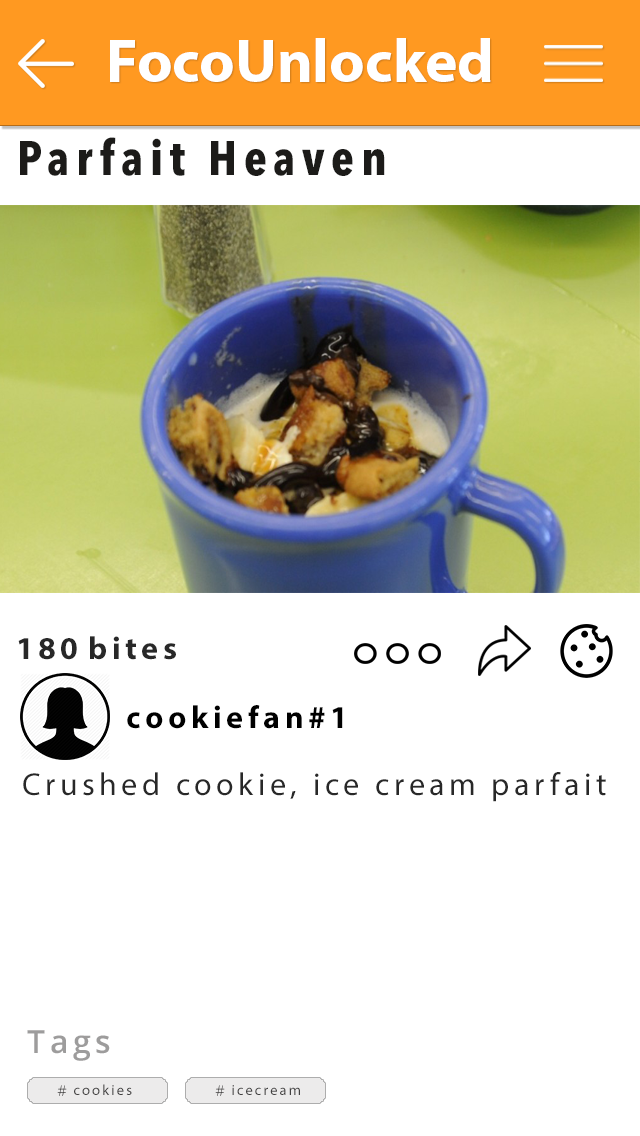
<style>
.page{position:relative;width:640px;height:1136px;background:#ffffff}
.page>*{position:absolute;margin:0}
.t1{font:61.3px "MyriadHebrew-Bold";color:#ffffff}
.t2{font:48px "AvenirNextCondensed-Bold";letter-spacing:0.14em;color:#1c1b19}
.t3{font:32px "MyriadPro-Bold";letter-spacing:0.14em;color:#282828}
.t4{font:32px "MyriadHebrew-Bold";letter-spacing:0.14em;color:#000000}
.t5{font:32px "MyriadPro-Regular";letter-spacing:0.14em;color:#282828}
.t6{font:32px "OpenSans-Semibold";letter-spacing:0.14em;color:#9d9c9c}
.t7{font:14.7px "OpenSans-Light";letter-spacing:0.14em;color:#424141}
.t8{font:14.7px "MyriadPro-Regular";letter-spacing:0.14em;color:#424141}
</style>
<div class="page">
<p class="t1" style="left:110px;top:38px;width:381px;height:44px">FocoUnlocked</p>
<p class="t2" style="left:20px;top:137px;width:365px;height:39px">Parfait Heaven</p>
<p class="t3" style="left:18px;top:638px;width:59px;height:22px">180</p>
<p class="t3" style="left:90px;top:636px;width:86px;height:24px">bites</p>
<p class="t4" style="left:127px;top:705px;width:216px;height:24px">cookiefan#1</p>
<p class="t5" style="left:23px;top:772px;width:583px;height:30px">Crushed cookie, ice cream parfait</p>
<p class="t6" style="left:27px;top:1030px;width:83px;height:31px">Tags</p>
<p class="t7" style="left:57px;top:1085px;width:10px;height:11px">#</p>
<p class="t8" style="left:74px;top:1084px;width:58px;height:11px">cookies</p>
<p class="t7" style="left:215px;top:1085px;width:10px;height:11px">#</p>
<p class="t8" style="left:232px;top:1085px;width:68px;height:10px">icecream</p>
</div>
